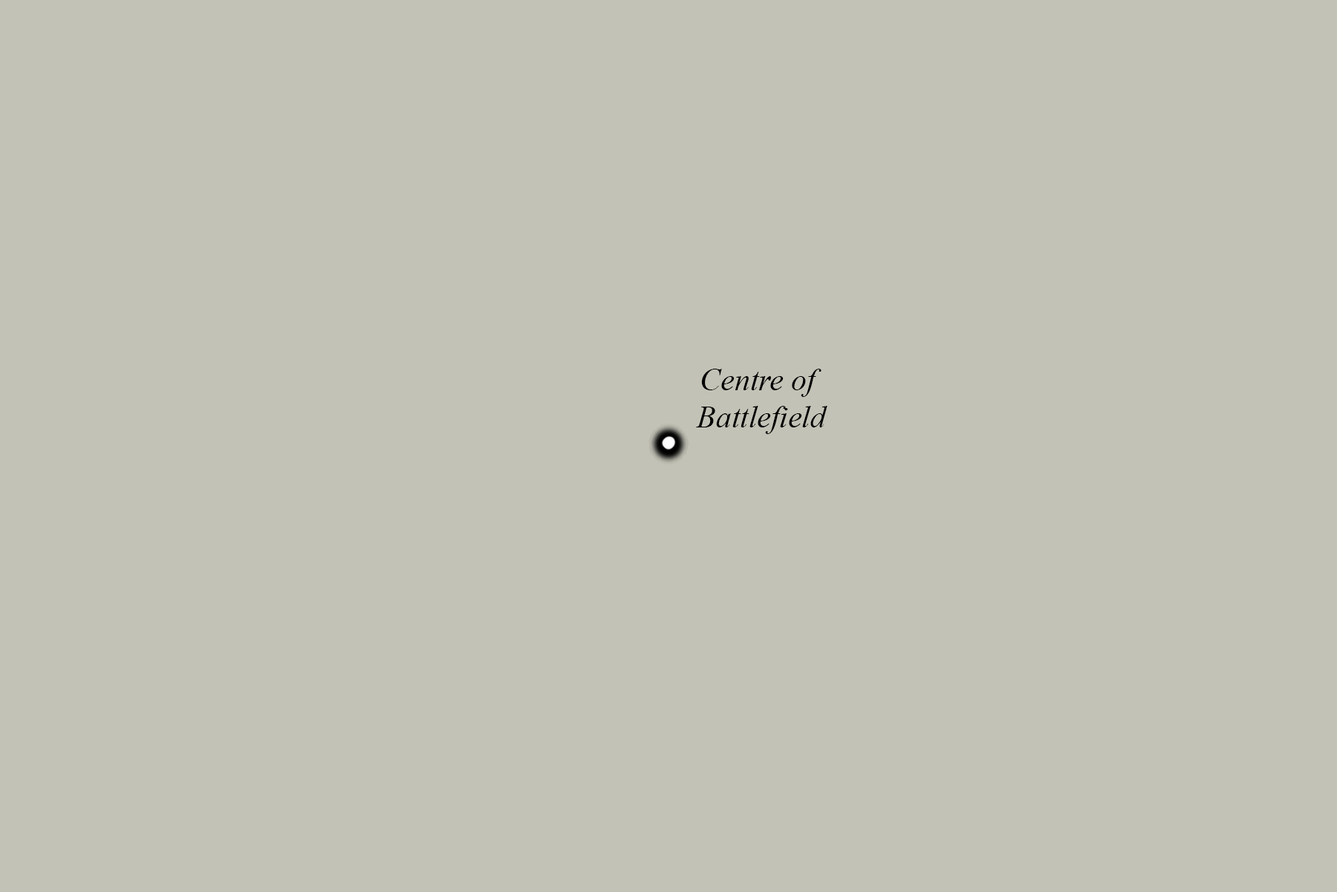
<style>
.page{position:relative;width:1337px;height:892px;background:#c2c2b6}
.page>*{position:absolute;margin:0}
.t1{font:31px "TimesNewRomanPS-ItalicMT";color:#000000}
</style>
<div class="page">
<p class="t1" style="left:696px;top:369px;width:132px;height:65px;text-align:center">Centre of <br>Battlefield</p>
</div>
